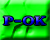
<style>
.page{position:relative;width:50px;height:40px}
.page>*{position:absolute;margin:0}
.t1{font:11.2px "MyungjoXB-HM";scale:1.53 1}
</style>
<div class="page">
<p class="t1" style="left:3px;top:16px;width:43px;height:9px">P-OK</p>
</div>
